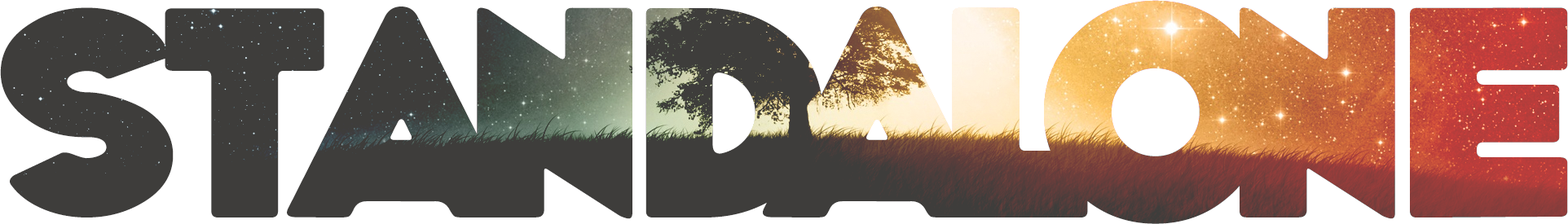
<style>
.page{position:relative;width:1568px;height:224px;background:#ffffff}
.page>*{position:absolute;margin:0}
.t1{font:277.1px "WhoopAss"}
</style>
<div class="page">
<p class="t1" style="left:0px;top:0px;width:1568px;height:224px">STANDALONE</p>
</div>
